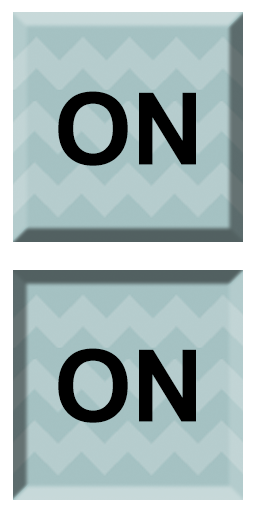
<style>
.page{position:relative;width:256px;height:512px}
.page>*{position:absolute;margin:0}
.t1{font:100px "Arial-BoldMT";color:#000000}
</style>
<div class="page">
<p class="t1" style="left:58px;top:91px;width:138px;height:75px">ON</p>
<p class="t1" style="left:58px;top:348px;width:138px;height:75px">ON</p>
</div>
